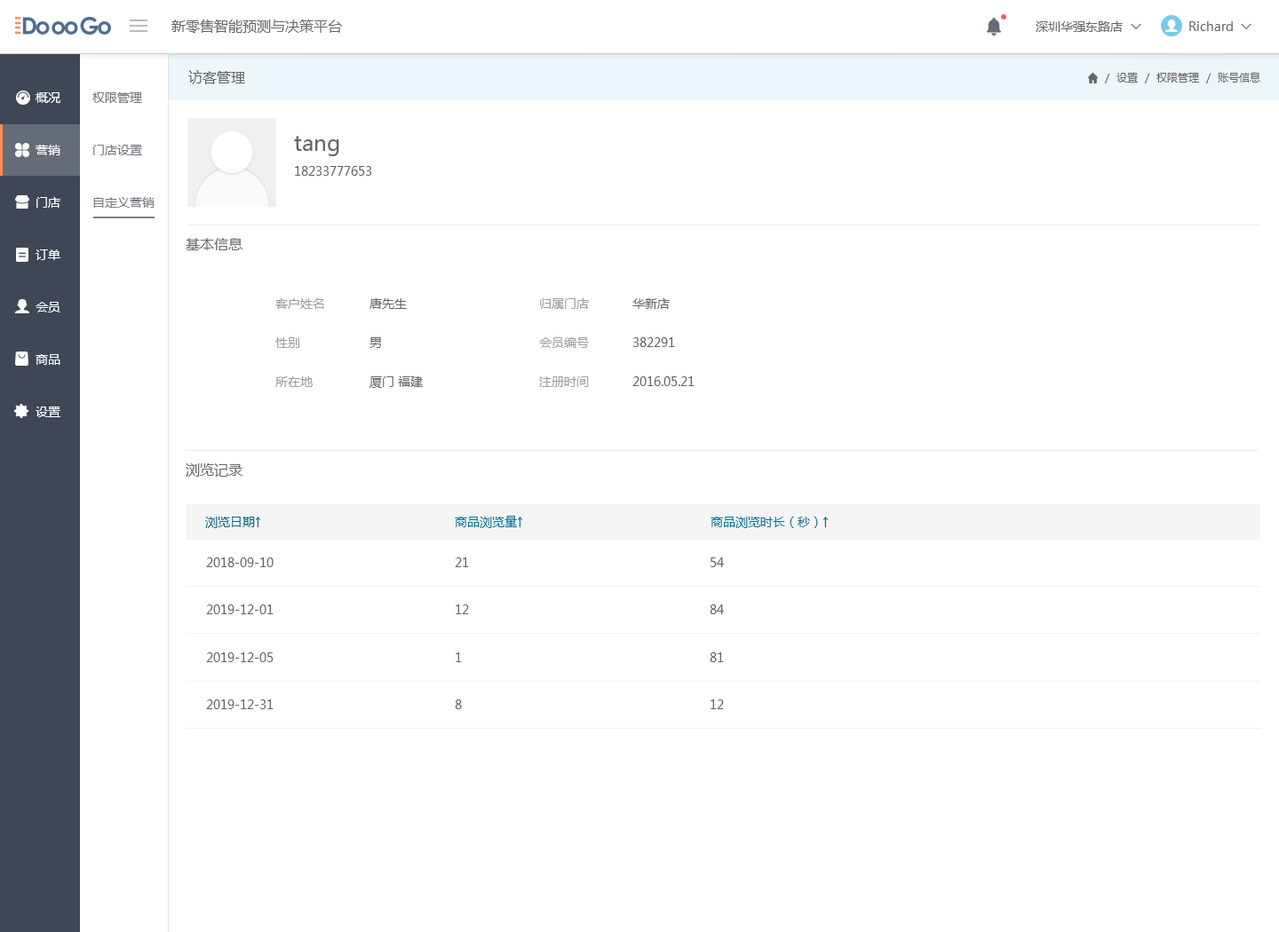
<style>
.page{position:relative;width:1279px;height:932px;background:#ffffff}
.page>*{position:absolute;margin:0}
.t1{font:14.2px "MicrosoftYaHeiUI";color:#666666}
.t2{font:12.4px "MicrosoftYaHeiUI";color:#666666}
.t3{font:12.4px "Marlett";color:#666666}
.t4{font:10.7px "MicrosoftYaHeiUI";color:#666666}
.t5{font:12.4px/52.4px "MicrosoftYaHeiUI";color:#ffffff}
.t6{font:12.4px/52.4px "MicrosoftYaHeiUI";color:#747982}
.t7{font:21.3px "MicrosoftYaHeiUI";color:#666666}
.t8{font:12.4px/39.1px "MicrosoftYaHeiUI";color:#9d9d9d}
.t9{font:12.4px/39.1px "MicrosoftYaHeiUI";color:#666666}
.t10{font:12.4px "MicrosoftYaHeiUI";color:#086a8b}
.t11{font:12.4px "MicrosoftYaHeiUI";color:#007398}
</style>
<div class="page">
<p class="t1" style="left:171px;top:20px;width:171px;height:13px">新零售智能预测与决策平台</p>
<p class="t2" style="left:1035px;top:21px;width:88px;height:11px">深圳华强东路店</p>
<p class="t2" style="left:1189px;top:21px;width:58px;height:10px">Richard <span class="t3">6</span></p>
<p class="t1" style="left:188px;top:70px;width:57px;height:14px">访客管理</p>
<p class="t4" style="left:1105px;top:72px;width:155px;height:11px">/  设置  /  权限管理  /  账号信息</p>
<p class="t5" style="left:36px;top:92px;width:24px;height:325px">概况<br>营销<br>门店<br>订单<br>会员<br>商品<br>设置</p>
<p class="t6" style="left:92px;top:92px;width:63px;height:116px">权限管理<br>门店设置<br>自定义营销</p>
<p class="t7" style="left:294px;top:136px;width:45px;height:20px">tang</p>
<p class="t2" style="left:295px;top:166px;width:77px;height:10px">18233777653</p>
<p class="t1" style="left:186px;top:238px;width:56px;height:12px">基本信息</p>
<p class="t8" style="left:275px;top:298px;width:49px;height:89px">客户姓名      <br>性别      <br>所在地</p>
<p class="t9" style="left:369px;top:298px;width:54px;height:90px">唐先生<br>男<br>厦门 福建</p>
<p class="t8" style="left:539px;top:298px;width:50px;height:89px">归属门店<br>会员编号<br>注册时间</p>
<p class="t9" style="left:632px;top:298px;width:62px;height:88px">华新店<br>382291<br>2016.05.21</p>
<p class="t1" style="left:186px;top:464px;width:56px;height:13px">浏览记录</p>
<p class="t10" style="left:205px;top:517px;width:55px;height:11px">浏览日期<span class="t11">↑</span></p>
<p class="t11" style="left:455px;top:516px;width:67px;height:12px">商品浏览量↑</p>
<p class="t11" style="left:710px;top:517px;width:118px;height:11px">商品浏览时长（秒）↑</p>
<p class="t2" style="left:206px;top:558px;width:68px;height:9px">2018-09-10</p>
<p class="t2" style="left:455px;top:558px;width:14px;height:9px">21</p>
<p class="t2" style="left:710px;top:558px;width:14px;height:9px">54</p>
<p class="t2" style="left:206px;top:605px;width:68px;height:10px">2019-12-01</p>
<p class="t2" style="left:456px;top:605px;width:13px;height:10px">12</p>
<p class="t2" style="left:710px;top:605px;width:14px;height:10px">84</p>
<p class="t2" style="left:206px;top:653px;width:68px;height:9px">2019-12-05</p>
<p class="t2" style="left:456px;top:653px;width:6px;height:9px">1</p>
<p class="t2" style="left:710px;top:653px;width:14px;height:9px">81</p>
<p class="t2" style="left:206px;top:700px;width:68px;height:10px">2019-12-31</p>
<p class="t2" style="left:455px;top:700px;width:7px;height:10px">8</p>
<p class="t2" style="left:710px;top:700px;width:14px;height:10px">12</p>
</div>
